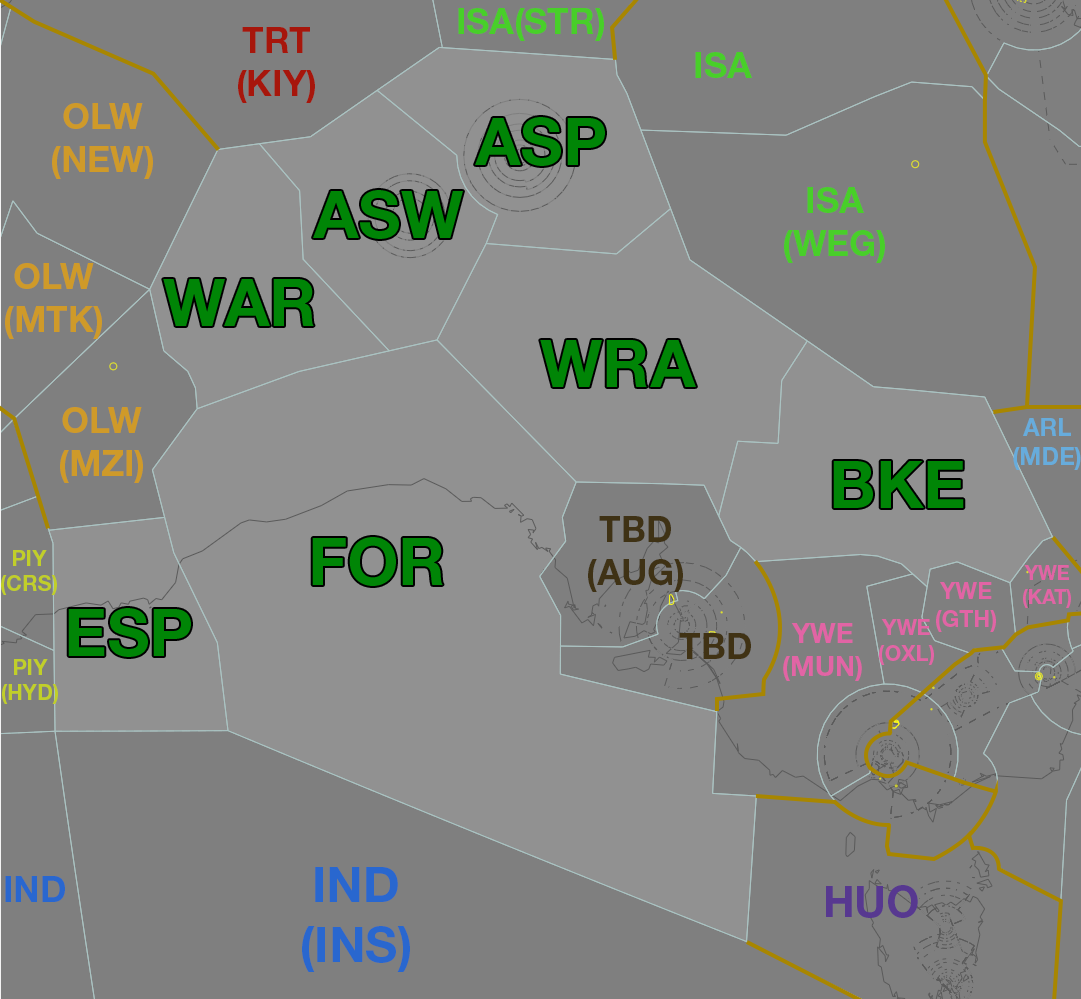
<style>
.page{position:relative;width:1081px;height:999px;background:#7f7f7f}
.page>*{position:absolute;margin:0}
.t1{font:35.6px "HelveticaNeueLTStd-Bd";color:#48cf29}
.t2{font:35.6px "HelveticaNeueLTStd-Bd";color:#a7160b}
.t3{font:35.6px "HelveticaNeueLTStd-Bd";color:#cf9a29}
.t4{font:65.8px "HelveticaNeueLTStd-Bd";color:#008506}
.t5{font:24.1px "HelveticaNeueLTStd-Bd";color:#67acdc}
.t6{font:35.6px "HelveticaNeueLTStd-Bd";color:#3f3215}
.t7{font:21.2px "HelveticaNeueLTStd-Bd";color:#c1cf29}
.t8{font:20px "HelveticaNeueLTStd-Bd";color:#e164a5}
.t9{font:23.1px "HelveticaNeueLTStd-Bd";color:#e264a5}
.t10{font:27.2px "HelveticaNeueLTStd-Bd";color:#e264a5}
.t11{font:21.6px "HelveticaNeueLTStd-Bd";color:#e264a5}
.t12{font:35.6px "HelveticaNeueLTStd-Bd";color:#403214}
.t13{font:49.5px "HelveticaNeueLTStd-Bd";color:#2967cf}
.t14{font:35.6px "HelveticaNeueLTStd-Bd";color:#2967cf}
.t15{font:43px "HelveticaNeueLTStd-Bd";color:#573890}
</style>
<div class="page">
<p class="t1" style="left:458px;top:8px;width:146px;height:33px">ISA(STR)</p>
<p class="t2" style="left:238px;top:27px;width:77px;height:76px;text-align:center">TRT<br>(KIY)</p>
<p class="t1" style="left:695px;top:52px;width:57px;height:26px">ISA</p>
<p class="t3" style="left:52px;top:103px;width:101px;height:76px;text-align:center">OLW<br>(NEW)</p>
<p class="t4" style="left:475px;top:117px;width:130px;height:49px">ASP</p>
<p class="t4" style="left:313px;top:190px;width:150px;height:49px">ASW</p>
<p class="t1" style="left:784px;top:187px;width:101px;height:76px;text-align:center">ISA<br>(WEG)</p>
<p class="t3" style="left:5px;top:263px;width:97px;height:76px;text-align:center">OLW<br>(MTK)</p>
<p class="t4" style="left:163px;top:279px;width:151px;height:47px">WAR</p>
<p class="t4" style="left:540px;top:340px;width:156px;height:47px">WRA</p>
<p class="t3" style="left:60px;top:407px;width:83px;height:76px;text-align:center">OLW<br>(MZI)</p>
<p class="t5" style="left:1013px;top:418px;width:68px;height:52px;text-align:center">ARL<br>(MDE)</p>
<p class="t4" style="left:833px;top:461px;width:131px;height:47px">BKE</p>
<p class="t6" style="left:588px;top:516px;width:95px;height:76px;text-align:center">TBD<br>(AUG)</p>
<p class="t4" style="left:312px;top:537px;width:131px;height:49px">FOR</p>
<p class="t7" style="left:1px;top:550px;width:56px;height:45px;text-align:center">PIY<br>(CRS)</p>
<p class="t8" style="left:1023px;top:565px;width:48px;height:43px;text-align:center">YWE<br>(KAT)</p>
<p class="t9" style="left:936px;top:582px;width:60px;height:50px;text-align:center">YWE<br>(GTH)</p>
<p class="t4" style="left:68px;top:608px;width:123px;height:49px">ESP</p>
<p class="t10" style="left:783px;top:623px;width:79px;height:58px;text-align:center">YWE<br>(MUN)</p>
<p class="t11" style="left:879px;top:619px;width:55px;height:46px;text-align:center">YWE<br>(OXL)</p>
<p class="t12" style="left:679px;top:633px;width:72px;height:26px">TBD</p>
<p class="t7" style="left:2px;top:659px;width:56px;height:45px;text-align:center">PIY<br>(HYD)</p>
<p class="t13" style="left:302px;top:867px;width:108px;height:105px;text-align:center">IND<br>(INS)</p>
<p class="t14" style="left:5px;top:876px;width:60px;height:26px">IND</p>
<p class="t15" style="left:826px;top:885px;width:92px;height:33px">HUO</p>
</div>
